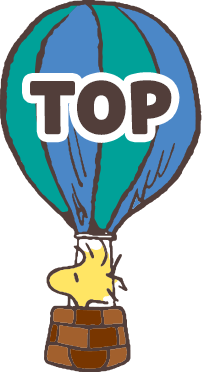
<style>
.page{position:relative;width:214px;height:372px;background:#ffffff}
.page>*{position:absolute;margin:0}
.t1{font:72.4px "CookieRunOTF-Black";color:#523e3a;text-transform:uppercase}
</style>
<div class="page">
<p class="t1" style="left:30px;top:80px;width:142px;height:55px">top</p>
</div>
